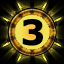
<style>
.page{position:relative;width:64px;height:64px}
.page>*{position:absolute;margin:0}
.t1{font:34.7px "Verdana-Bold";color:#000000}
</style>
<div class="page">
<p class="t1" style="left:22px;top:19px;width:21px;height:27px">3</p>
</div>
